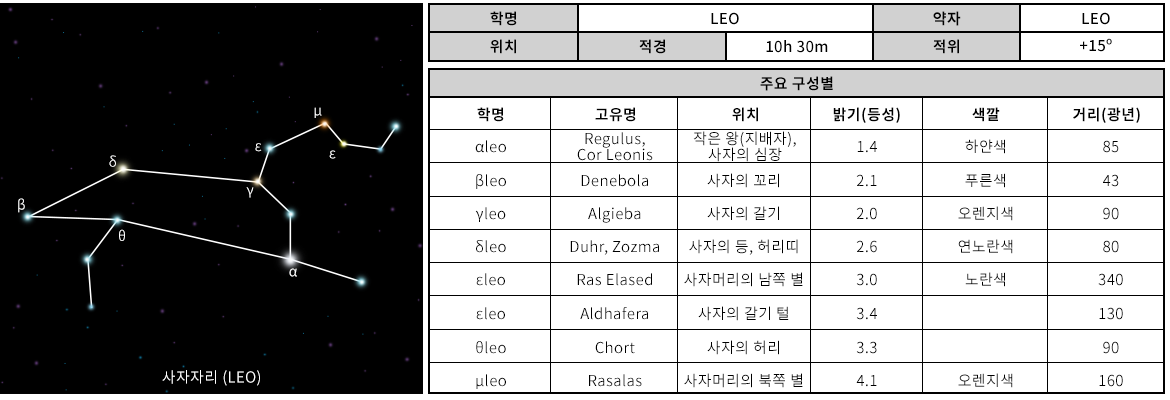
<style>
.page{position:relative;width:1170px;height:400px;background:#ffffff}
.page>*{position:absolute;margin:0}
.t1{font:15px "NotoSansCJKkr-Bold";letter-spacing:0.025em;color:#000000}
.t2{font:15px "NotoSansCJKkr-Medium";letter-spacing:0.025em;color:#000000}
.t3{font:13.7px "NotoSansCJKkr-DemiLight";letter-spacing:0.025em;color:#ffffff}
.t4{font:15px/16px "NotoSansCJKkr-DemiLight";letter-spacing:0.025em;color:#000000}
.t5{font:13.7px "NotoSansCJKkr-DemiLight";letter-spacing:0.025em}
.t6{font:15px "NotoSansCJKkr-DemiLight";letter-spacing:0.025em;color:#000000}
.t7{font:15px "NotoSansCJKkr-DemiLight";letter-spacing:0.025em}
.t8{font:15px "NotoSansCJKkr-DemiLight";letter-spacing:0.025em;color:#ffffff}
</style>
<div class="page">
<p class="t1" style="left:490px;top:11px;width:27px;height:15px">학명</p>
<p class="t2" style="left:711px;top:12px;width:28px;height:13px">LEO</p>
<p class="t1" style="left:933px;top:11px;width:28px;height:15px">약자</p>
<p class="t2" style="left:1082px;top:12px;width:28px;height:13px">LEO</p>
<p class="t1" style="left:490px;top:39px;width:26px;height:15px">위치</p>
<p class="t1" style="left:639px;top:39px;width:27px;height:15px">적경</p>
<p class="t2" style="left:766px;top:40px;width:62px;height:13px">10h 30m</p>
<p class="t1" style="left:933px;top:39px;width:26px;height:15px">적위</p>
<p class="t2" style="left:1080px;top:38px;width:32px;height:14px">+15º</p>
<p class="t1" style="left:760px;top:76px;width:73px;height:15px">주요 구성별</p>
<p class="t3" style="left:314px;top:107px;width:8px;height:11px">μ</p>
<p class="t1" style="left:477px;top:107px;width:27px;height:15px">학명</p>
<p class="t1" style="left:595px;top:107px;width:41px;height:15px">고유명</p>
<p class="t1" style="left:732px;top:107px;width:26px;height:15px">위치</p>
<p class="t1" style="left:833px;top:107px;width:67px;height:16px">밝기(등성)</p>
<p class="t1" style="left:972px;top:107px;width:28px;height:15px">색깔</p>
<p class="t1" style="left:1073px;top:107px;width:67px;height:16px">거리(광년)</p>
<p class="t4" style="left:577px;top:132px;width:76px;height:29px;text-align:center">Regulus,<br>Cor Leonis</p>
<p class="t4" style="left:693px;top:131px;width:103px;height:31px;text-align:center">작은 왕(지배자),<br>사자의 심장</p>
<p class="t3" style="left:255px;top:143px;width:7px;height:9px">ε</p>
<p class="t5" style="left:329px;top:150px;width:7px;height:9px">ε</p>
<p class="t6" style="left:475px;top:140px;width:31px;height:13px">αleo</p>
<p class="t6" style="left:857px;top:141px;width:20px;height:12px">1.4</p>
<p class="t6" style="left:965px;top:139px;width:40px;height:15px">하얀색</p>
<p class="t6" style="left:1103px;top:140px;width:16px;height:13px">85</p>
<p class="t3" style="left:109px;top:155px;width:7px;height:12px">δ</p>
<p class="t6" style="left:476px;top:174px;width:30px;height:15px">βleo</p>
<p class="t6" style="left:581px;top:174px;width:67px;height:13px">Denebola</p>
<p class="t6" style="left:707px;top:173px;width:72px;height:15px">사자의 꼬리</p>
<p class="t6" style="left:856px;top:174px;width:21px;height:13px">2.1</p>
<p class="t6" style="left:965px;top:173px;width:40px;height:15px">푸른색</p>
<p class="t6" style="left:1103px;top:174px;width:16px;height:13px">43</p>
<p class="t3" style="left:18px;top:198px;width:7px;height:15px">β</p>
<p class="t3" style="left:246px;top:187px;width:8px;height:11px">γ</p>
<p class="t6" style="left:475px;top:207px;width:31px;height:15px">γleo</p>
<p class="t6" style="left:588px;top:207px;width:53px;height:16px">Algieba</p>
<p class="t6" style="left:707px;top:206px;width:72px;height:15px">사자의 갈기</p>
<p class="t6" style="left:856px;top:207px;width:21px;height:13px">2.0</p>
<p class="t6" style="left:958px;top:206px;width:55px;height:15px">오렌지색</p>
<p class="t7" style="left:1103px;top:207px;width:16px;height:13px">90</p>
<p class="t3" style="left:119px;top:229px;width:6px;height:12px">θ</p>
<p class="t6" style="left:476px;top:240px;width:30px;height:13px">δleo</p>
<p class="t6" style="left:570px;top:240px;width:89px;height:15px">Duhr, Zozma</p>
<p class="t6" style="left:689px;top:239px;width:109px;height:16px">사자의 등, 허리띠</p>
<p class="t6" style="left:856px;top:240px;width:21px;height:13px">2.6</p>
<p class="t6" style="left:958px;top:239px;width:55px;height:15px">연노란색</p>
<p class="t6" style="left:1103px;top:240px;width:16px;height:13px">80</p>
<p class="t3" style="left:289px;top:268px;width:8px;height:9px">α</p>
<p class="t6" style="left:476px;top:273px;width:29px;height:13px">εleo</p>
<p class="t6" style="left:577px;top:273px;width:75px;height:13px">Ras Elased</p>
<p class="t6" style="left:684px;top:272px;width:119px;height:15px">사자머리의 남쪽 별</p>
<p class="t6" style="left:856px;top:273px;width:21px;height:13px">3.0</p>
<p class="t6" style="left:965px;top:272px;width:40px;height:15px">노란색</p>
<p class="t6" style="left:1098px;top:273px;width:25px;height:13px">340</p>
<p class="t6" style="left:476px;top:307px;width:29px;height:13px">εleo</p>
<p class="t6" style="left:580px;top:307px;width:68px;height:13px">Aldhafera</p>
<p class="t6" style="left:698px;top:306px;width:91px;height:15px">사자의 갈기 털</p>
<p class="t6" style="left:856px;top:307px;width:21px;height:13px">3.4</p>
<p class="t6" style="left:1099px;top:307px;width:24px;height:13px">130</p>
<p class="t6" style="left:476px;top:341px;width:30px;height:13px">θleo</p>
<p class="t6" style="left:595px;top:341px;width:40px;height:13px">Chort</p>
<p class="t6" style="left:707px;top:340px;width:72px;height:15px">사자의 허리</p>
<p class="t6" style="left:856px;top:341px;width:21px;height:13px">3.3</p>
<p class="t7" style="left:1103px;top:341px;width:16px;height:13px">90</p>
<p class="t8" style="left:162px;top:370px;width:98px;height:16px">사자자리 (LEO)</p>
<p class="t6" style="left:476px;top:374px;width:30px;height:15px">μleo</p>
<p class="t6" style="left:589px;top:374px;width:53px;height:13px">Rasalas</p>
<p class="t6" style="left:684px;top:373px;width:119px;height:15px">사자머리의 북쪽 별</p>
<p class="t6" style="left:856px;top:375px;width:21px;height:12px">4.1</p>
<p class="t6" style="left:958px;top:373px;width:55px;height:15px">오렌지색</p>
<p class="t6" style="left:1099px;top:374px;width:24px;height:13px">160</p>
</div>
